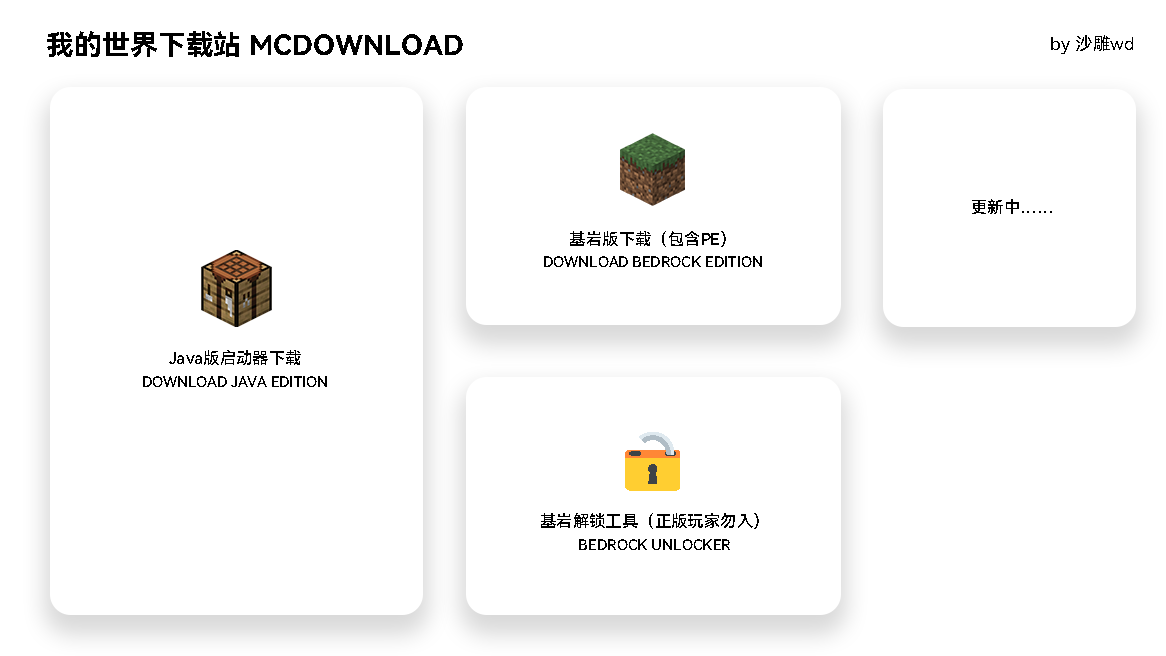
<style>
.page{position:relative;width:1166px;height:656px;background:#ffffff}
.page>*{position:absolute;margin:0}
.t1{font:27.9px "HarmonyOS_Sans_SC_Bold";color:#000000}
.t2{font:17.6px "HarmonyOS_Sans_SC";color:#000000}
.t3{font:16.4px "HarmonyOS_Sans_SC_Medium";color:#000000}
.t4{font:14.6px/24.3px "HarmonyOS_Sans_SC_Medium";color:#000000}
.t5{font:16.4px/24.3px "HarmonyOS_Sans_SC_Medium";color:#000000}
</style>
<div class="page">
<p class="t1" style="left:47px;top:31px;width:416px;height:26px">我的世界下载站 MCDOWNLOAD</p>
<p class="t2" style="left:1051px;top:35px;width:82px;height:19px">by 沙雕wd</p>
<p class="t3" style="left:972px;top:199px;width:80px;height:15px">更新中……</p>
<p class="t4" style="left:544px;top:231px;width:218px;height:36px;text-align:center"><span class="t5">基岩版下载（包含PE）<br></span>DOWNLOAD BEDROCK EDITION</p>
<p class="t4" style="left:143px;top:350px;width:184px;height:37px;text-align:center"><span class="t5">Java版启动器下载<br></span>DOWNLOAD JAVA EDITION</p>
<p class="t4" style="left:541px;top:513px;width:218px;height:37px;text-align:center"><span class="t5">基岩解锁工具（正版玩家勿入）<br></span>BEDROCK UNLOCKER</p>
</div>
